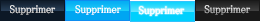
<style>
.page{position:relative;width:260px;height:22px}
.page>*{position:absolute;margin:0}
.t1{font:11px "MS-PMincho";color:#dfdfdf}
.t2{font:11px "MS-PMincho";color:#ffffff}
.t3{font:11px "MS-PMincho"}
</style>
<div class="page">
<p class="t1" style="left:9px;top:5px;width:47px;height:10px">Supprimer</p>
<p class="t2" style="left:75px;top:5px;width:46px;height:10px">Supprimer</p>
<p class="t2" style="left:138px;top:6px;width:47px;height:10px">Supprimer</p>
<p class="t3" style="left:204px;top:5px;width:47px;height:10px">Supprimer</p>
</div>
